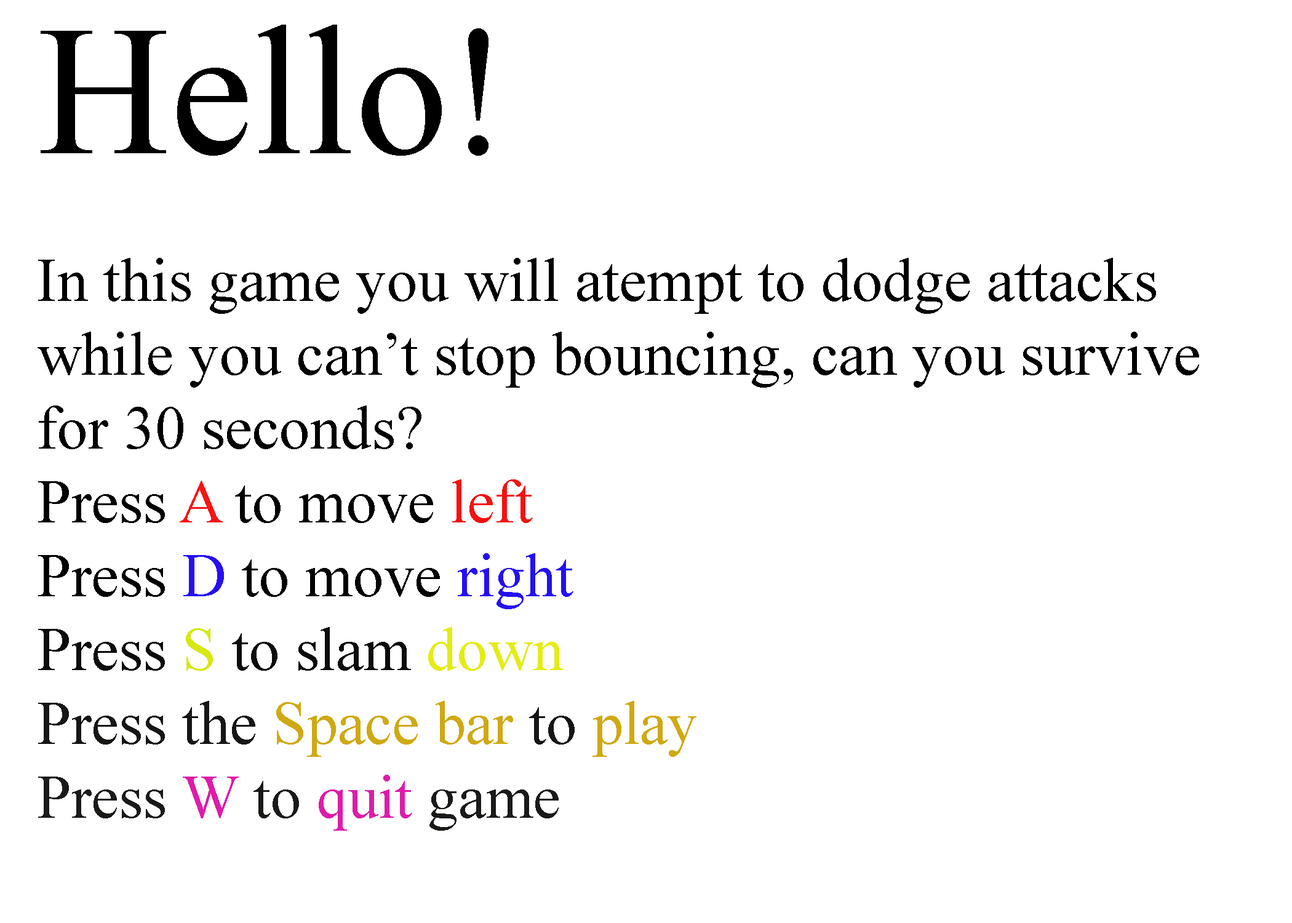
<style>
.page{position:relative;width:1292px;height:923px;background:#ffffff}
.page>*{position:absolute;margin:0}
.t1{font:61.5px "TimesNewRomanPSMT";color:#000000}
.t2{font:184.6px "TimesNewRomanPSMT";color:#000000}
.t3{font:61.5px "TimesNewRomanPSMT";color:#f61414}
.t4{font:61.5px "TimesNewRomanPSMT";color:#f41111}
.t5{font:61.5px "TimesNewRomanPSMT";color:#250ff3}
.t6{font:61.5px "TimesNewRomanPSMT";color:#0c0c0c}
.t7{font:61.5px "TimesNewRomanPSMT";color:#d6e812}
.t8{font:61.5px "TimesNewRomanPSMT";color:#e4ec15}
.t9{font:61.5px "TimesNewRomanPSMT";color:#161615}
.t10{font:61.5px "TimesNewRomanPSMT";color:#cfa913}
.t11{font:61.5px "TimesNewRomanPSMT";color:#1a1a18}
.t12{font:61.5px "TimesNewRomanPSMT";color:#de1ca9}
</style>
<div class="page">
<p class="t1" style="left:38px;top:25px;width:1161px;height:806px"><span class="t2">Hello!<br></span><br>In this game you will atempt to dodge attacks<br>while you can’t stop bouncing, can you survive <br>for 30 seconds?<br>Press <span class="t3">A</span> to move <span class="t4">left</span> <br>Press <span class="t5">D </span>to move <span class="t5">right<br></span><span class="t6">Press </span><span class="t7">S</span><span class="t6"> to slam </span><span class="t8">down<br></span><span class="t9">Press the </span><span class="t10">Space bar</span><span class="t9"> to</span><span class="t10"> play<br></span><span class="t11">Press </span><span class="t12">W</span><span class="t11"> to </span><span class="t12">quit</span><span class="t11"> game</span></p>
</div>
